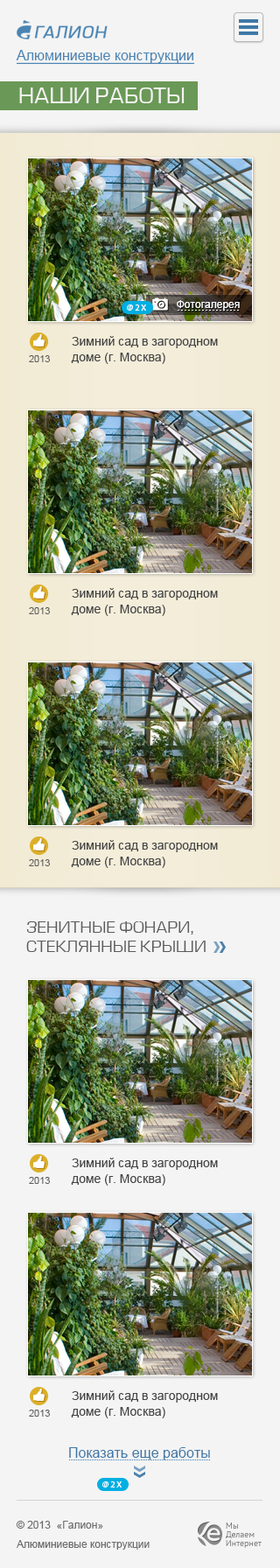
<style>
.page{position:relative;width:280px;height:1568px;background:#f4f4f4}
.page>*{position:absolute;margin:0}
.t1{font:14px "ArialMT";color:#4a84b2;text-decoration:underline}
.t2{font:21px "EuropeNormal";color:#f4f4f4;text-transform:uppercase}
.t3{font:8.9px "MyriadPro-Regular";letter-spacing:0.18em;color:#ffffff;text-transform:uppercase}
.t4{font:10.5px "ArialMT";color:#f4f4f4}
.t5{font:12.2px/15.8px "ArialMT";color:#454545}
.t6{font:9.6px "ArialMT";color:#5c5c5c}
.t7{font:15.8px/19.2px "EuropeNormal";color:#5b5b5b;text-transform:uppercase}
.t8{font:14px "ArialMT";color:#3f78a7}
.t9{font:10.5px/19.2px "ArialMT";color:#6d6d6d}
.t10{font:10.5px/12.2px "ArialMT";color:#6d6d6d}
.t11{font:8.8px/8.8px "PTSans-Regular";color:#636363}
</style>
<div class="page">
<p class="t1" style="left:16px;top:50px;width:178px;height:15px">Алюминиевые конструкции</p>
<p class="t2" style="left:19px;top:88px;width:166px;height:15px">НАШИ РАБОТЫ</p>
<p class="t3" style="left:127px;top:304px;width:19px;height:7px">@2X</p>
<p class="t4" style="left:177px;top:300px;width:63px;height:10px">Фотогалерея</p>
<p class="t5" style="left:71px;top:336px;width:147px;height:28px">Зимний сад в загородном<br>доме (г. Москва)</p>
<p class="t6" style="left:29px;top:355px;width:21px;height:7px">2013</p>
<p class="t5" style="left:71px;top:588px;width:147px;height:28px">Зимний сад в загородном<br>доме (г. Москва)</p>
<p class="t6" style="left:29px;top:607px;width:21px;height:7px">2013</p>
<p class="t5" style="left:71px;top:840px;width:147px;height:28px">Зимний сад в загородном<br>доме (г. Москва)</p>
<p class="t6" style="left:29px;top:859px;width:21px;height:7px">2013</p>
<p class="t7" style="left:26px;top:921px;width:180px;height:31px">Зенитные фонари, <br>стеклянные крыши</p>
<p class="t5" style="left:71px;top:1158px;width:147px;height:28px">Зимний сад в загородном<br>доме (г. Москва)</p>
<p class="t6" style="left:29px;top:1177px;width:21px;height:7px">2013</p>
<p class="t5" style="left:71px;top:1390px;width:147px;height:28px">Зимний сад в загородном<br>доме (г. Москва)</p>
<p class="t6" style="left:29px;top:1410px;width:21px;height:7px">2013</p>
<p class="t8" style="left:69px;top:1447px;width:141px;height:13px">Показать еще работы</p>
<p class="t3" style="left:102px;top:1481px;width:20px;height:7px">@2X</p>
<p class="t9" style="left:16px;top:1521px;width:134px;height:29px">© 2013  «Галион»<br>Алюминиевые <span class="t10">конструкции</span></p>
<p class="t11" style="left:226px;top:1522px;width:36px;height:26px">Мы <br>Делаем<br>Интернет</p>
</div>
